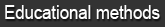
<style>
.page{position:relative;width:165px;height:27px;background:#333333}
.page>*{position:absolute;margin:0}
.t1{font:19.4px "ArialMT";color:#ffffff;scale:0.86 1}
</style>
<div class="page">
<p class="t1" style="left:5px;top:5px;width:155px;height:14px">Educational methods</p>
</div>
